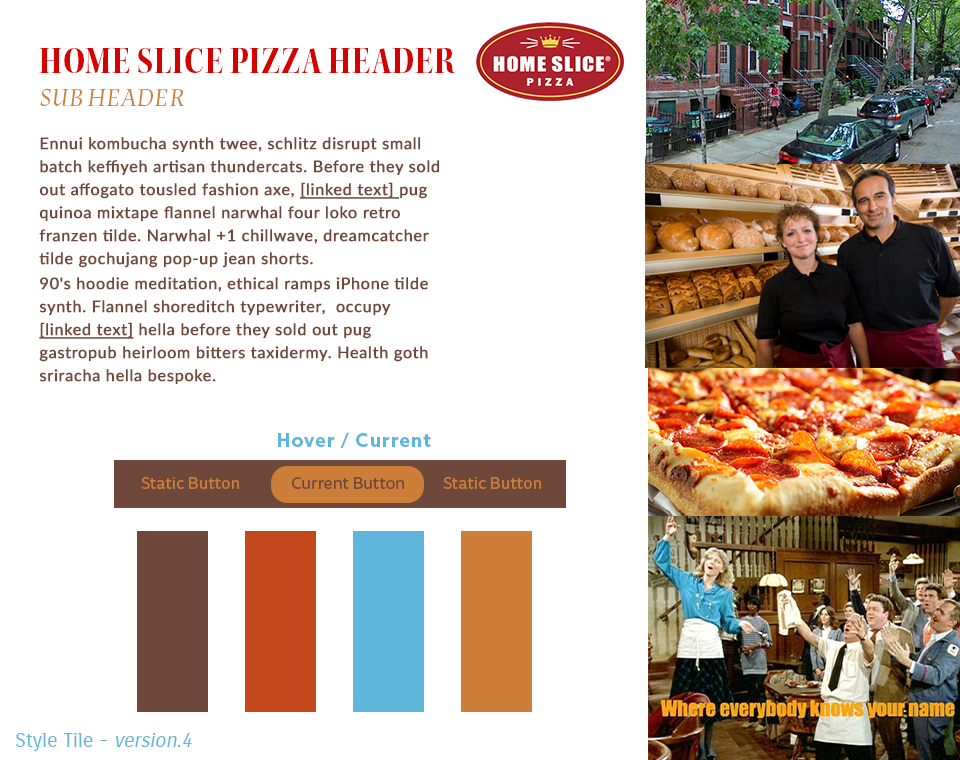
<style>
.page{position:relative;width:960px;height:760px;background:#ffffff}
.page>*{position:absolute;margin:0}
.t1{font:38px "KeplerStd-BoldScnDisp";letter-spacing:0.02em;color:#d30300;text-transform:uppercase}
.t2{font:25px "LaptureDisplay-Italic";letter-spacing:0.01em;color:#cd7e38;text-transform:uppercase}
.t3{font:16px/23px "Lato-Regular";letter-spacing:0.025em;color:#6f483c;font-weight:bold}
.t4{font:16px/23px "Lato-Regular";letter-spacing:0.025em;color:#6f483c;font-weight:bold;text-decoration:underline}
.t5{font:19px "AzoSans-Bold";letter-spacing:0.05em;color:#5fb5dc}
.t6{font:17px "TisaSansPro";color:#cd7e38}
.t7{font:17px "TisaSansPro";color:#6f483c}
.t8{font:20px "CarroisGothic-Regular";color:#5fb5dc}
.t9{font:20px "CarroisGothic-Regular";color:#5fb5dc;font-style:italic}
</style>
<div class="page">
<p class="t1" style="left:39px;top:47px;width:416px;height:27px">Home Slice Pizza Header</p>
<p class="t2" style="left:40px;top:88px;width:144px;height:18px">Sub Header</p>
<p class="t3" style="left:39px;top:137px;width:401px;height:248px">Ennui kombucha synth twee, schlitz disrupt small batch keffiyeh artisan thundercats. Before they sold out affogato tousled fashion axe, <span class="t4">[linked text] </span>pug quinoa mixtape flannel narwhal four loko retro franzen tilde. Narwhal +1 chillwave, dreamcatcher tilde gochujang pop-up jean shorts. <br>90's hoodie meditation, ethical ramps iPhone tilde synth. Flannel shoreditch typewriter,  occupy <span class="t4">[linked text] </span>hella before they sold out pug gastropub heirloom bitters taxidermy. Health goth sriracha hella bespoke.</p>
<p class="t5" style="left:278px;top:432px;width:153px;height:16px">Hover / Current</p>
<p class="t6" style="left:141px;top:477px;width:98px;height:12px">Static Button</p>
<p class="t7" style="left:292px;top:477px;width:112px;height:12px">Current Button</p>
<p class="t6" style="left:443px;top:477px;width:98px;height:12px">Static Button</p>
<p class="t8" style="left:15px;top:733px;width:177px;height:18px">Style Tile - <span class="t9">version.4</span></p>
</div>
